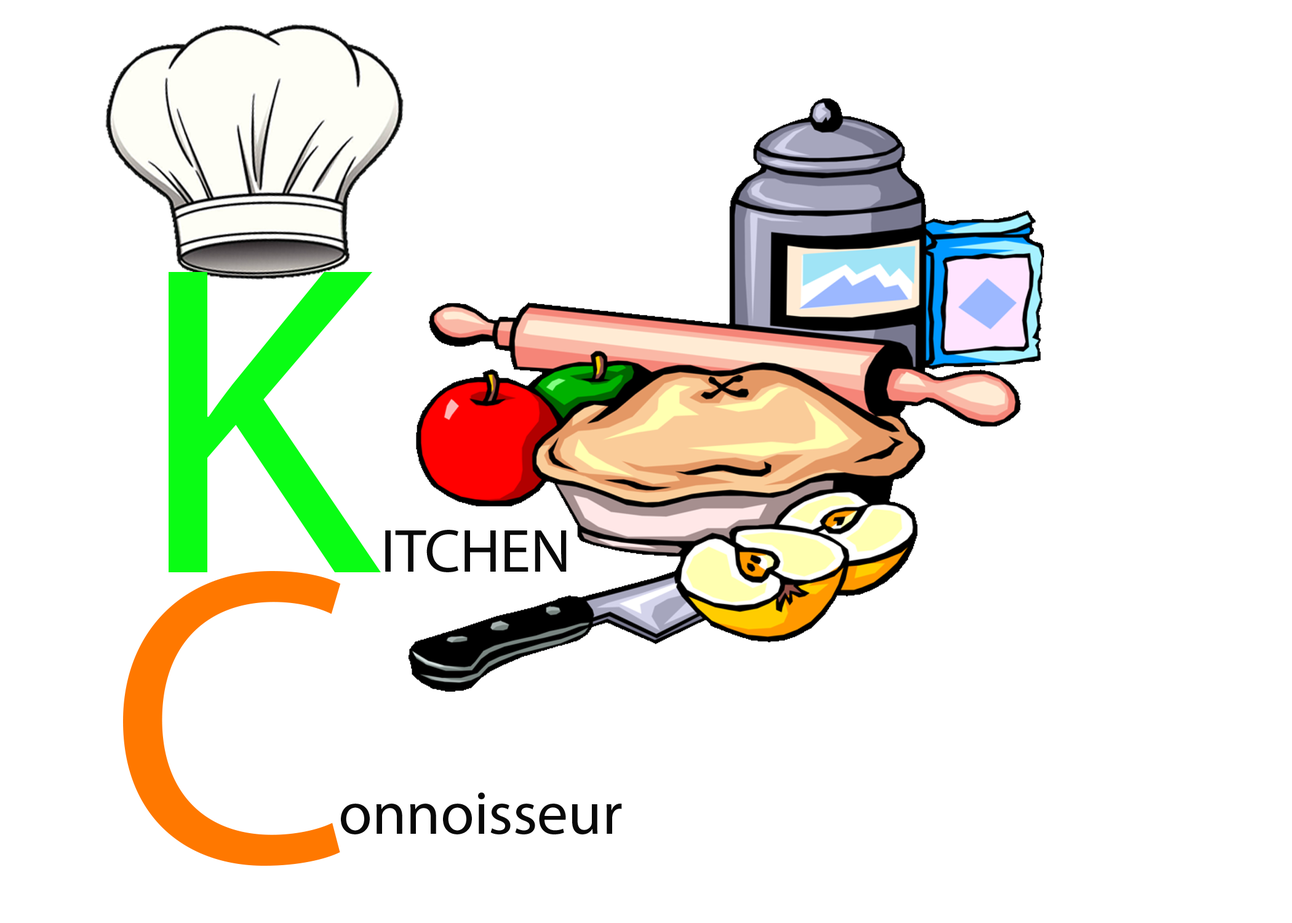
<style>
.page{position:relative;width:1292px;height:923px;background:#ffffff}
.page>*{position:absolute;margin:0}
.t1{font:445.9px "MyriadPro-Regular";color:#09fd14}
.t2{font:61.5px "MyriadPro-Regular";color:#080808}
.t3{font:424.3px "MyriadPro-Regular";color:#ff7800}
</style>
<div class="page">
<p class="t1" style="left:169px;top:272px;width:212px;height:300px">K</p>
<p class="t2" style="left:385px;top:530px;width:182px;height:42px">ITCHEN</p>
<p class="t3" style="left:123px;top:571px;width:218px;height:295px">C</p>
<p class="t2" style="left:341px;top:792px;width:281px;height:42px">onnoisseur</p>
</div>
